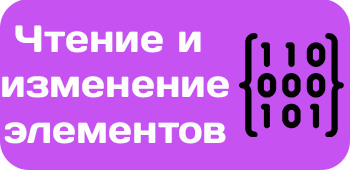
<style>
.page{position:relative;width:350px;height:170px;background:#c653f1}
.page>*{position:absolute;margin:0}
.t1{font:38px "Days";color:#ffffff}
</style>
<div class="page">
<p class="t1" style="left:2px;top:25px;width:227px;height:119px;text-align:center">Чтение и <br>изменение<br>элементов</p>
</div>
